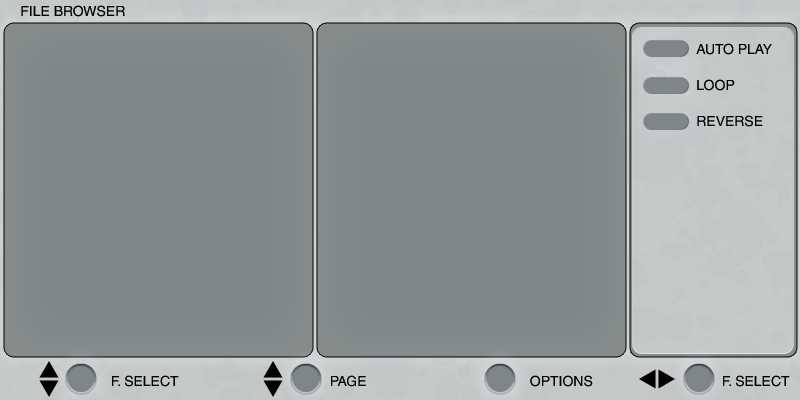
<style>
.page{position:relative;width:800px;height:400px;background:#7f8688}
.page>*{position:absolute;margin:0}
.t1{font:24px "HelveticaLTStdsteevoharvie";color:#000000}
.t2{font:24px/18px "HelveticaLTStdsteevoharvie";color:#000000}
</style>
<div class="page">
<p class="t1" style="left:21px;top:5px;width:104px;height:12px">FILE BROWSER</p>
<p class="t2" style="left:696px;top:43px;width:76px;height:84px">AUTO PLAY<br><br>LOOP<br><br>REVERSE</p>
<p class="t1" style="left:112px;top:375px;width:67px;height:12px">F. SELECT</p>
<p class="t1" style="left:331px;top:375px;width:35px;height:12px">PAGE</p>
<p class="t1" style="left:530px;top:375px;width:63px;height:12px">OPTIONS</p>
<p class="t1" style="left:723px;top:375px;width:67px;height:12px">F. SELECT</p>
</div>
